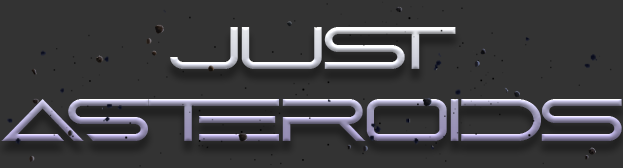
<style>
.page{position:relative;width:623px;height:168px;background:#333333}
.page>*{position:absolute;margin:0}
.t1{font:60px "abnes-Regular";letter-spacing:-0.04em;scale:1.06 1}
</style>
<div class="page">
<p class="t1" style="left:1px;top:27px;width:621px;height:114px;text-align:center">just<br>asteroids</p>
</div>
